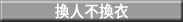
<style>
.page{position:relative;width:183px;height:22px;background:#9b9b99}
.page>*{position:absolute;margin:0}
.t1{font:16px "SourceHanSansTW-Regular";color:#ffffff;font-weight:bold;scale:0.9 1}
</style>
<div class="page">
<p class="t1" style="left:55px;top:3px;width:73px;height:16px">換人不換衣</p>
</div>
